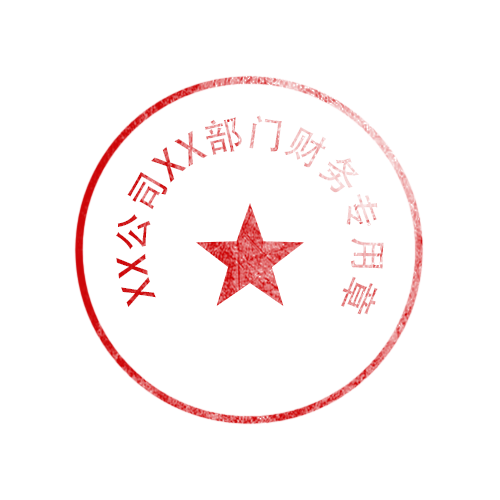
<style>
.page{position:relative;width:500px;height:500px;background:#ffffff}
.page>*{position:absolute;margin:0}
.t1{font:38px "AdobeHeitiStd-Regular"}
</style>
<div class="page">
<p class="t1" style="left:116px;top:115px;width:268px;height:200px;rotate:-25deg">XX公司XX部门财务专用章</p>
</div>
